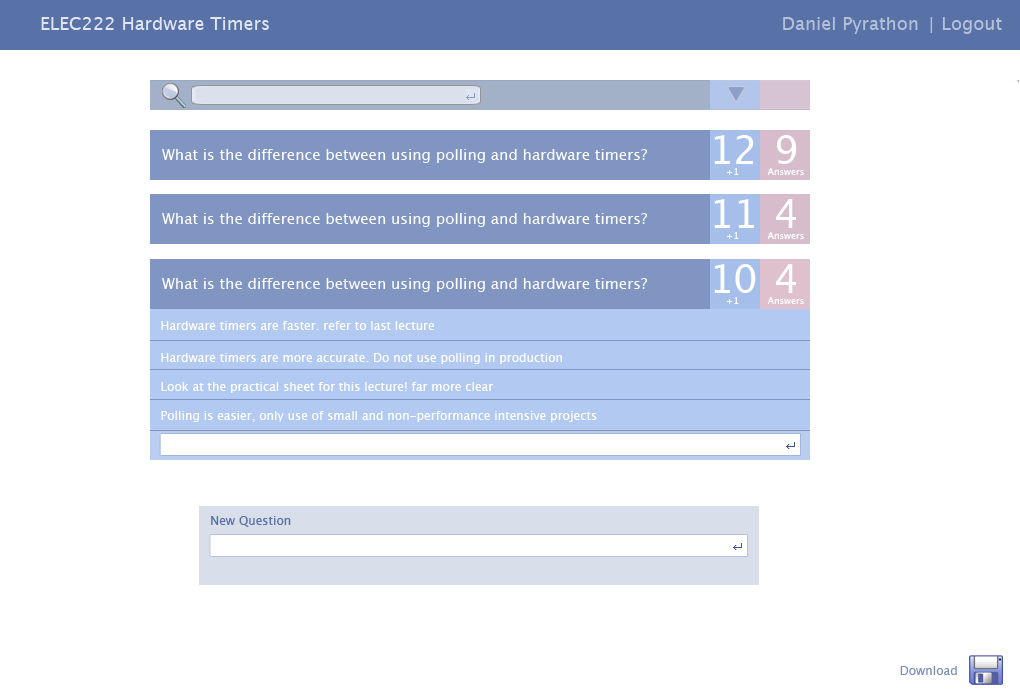
<style>
.page{position:relative;width:1020px;height:700px;background:#ffffff}
.page>*{position:absolute;margin:0}
.t1{font:18px "LucidaGrande";color:#dae1ef}
.t2{font:18px "LucidaGrande";color:#a7b4d1}
.t3{font:39px "LucidaGrande";color:#ffffff}
.t4{font:15px "LucidaGrande";color:#ffffff}
.t5{font:9px "LucidaGrande";color:#ffffff}
.t6{font:12px "LucidaGrande";color:#ffffff}
.t7{font:12px "LucidaGrande";color:#5872a7}
.t8{font:12px "LucidaGrande";color:#7c91ba}
</style>
<div class="page">
<p class="t1" style="left:41px;top:17px;width:228px;height:13px">ELEC222 Hardware Timers</p>
<p class="t2" style="left:783px;top:17px;width:150px;height:17px">Daniel Pyrathon  |</p>
<p class="t2" style="left:942px;top:17px;width:60px;height:17px">Logout</p>
<p class="t3" style="left:714px;top:135px;width:40px;height:29px">12</p>
<p class="t3" style="left:777px;top:135px;width:20px;height:29px">9</p>
<p class="t4" style="left:162px;top:149px;width:486px;height:14px">What is the difference between using polling and hardware timers?</p>
<p class="t5" style="left:726px;top:168px;width:13px;height:7px">+1</p>
<p class="t5" style="left:767px;top:168px;width:37px;height:7px">Answers</p>
<p class="t3" style="left:714px;top:199px;width:40px;height:29px">11</p>
<p class="t3" style="left:776px;top:199px;width:20px;height:29px">4</p>
<p class="t4" style="left:162px;top:213px;width:486px;height:14px">What is the difference between using polling and hardware timers?</p>
<p class="t5" style="left:726px;top:232px;width:13px;height:7px">+1</p>
<p class="t5" style="left:767px;top:232px;width:37px;height:7px">Answers</p>
<p class="t3" style="left:714px;top:264px;width:42px;height:29px">10</p>
<p class="t3" style="left:776px;top:264px;width:20px;height:29px">4</p>
<p class="t4" style="left:162px;top:278px;width:486px;height:14px">What is the difference between using polling and hardware timers?</p>
<p class="t5" style="left:726px;top:297px;width:13px;height:7px">+1</p>
<p class="t5" style="left:767px;top:297px;width:37px;height:7px">Answers</p>
<p class="t6" style="left:161px;top:321px;width:273px;height:9px">Hardware timers are faster. refer to last lecture</p>
<p class="t6" style="left:161px;top:353px;width:401px;height:11px">Hardware timers are more accurate. Do not use polling in production</p>
<p class="t6" style="left:161px;top:382px;width:332px;height:11px">Look at the practical sheet for this lecture! far more clear</p>
<p class="t6" style="left:161px;top:411px;width:436px;height:11px">Polling is easier, only use of small and non-performance intensive projects</p>
<p class="t7" style="left:211px;top:516px;width:80px;height:11px">New Question</p>
<p class="t8" style="left:900px;top:666px;width:57px;height:9px">Download</p>
</div>
